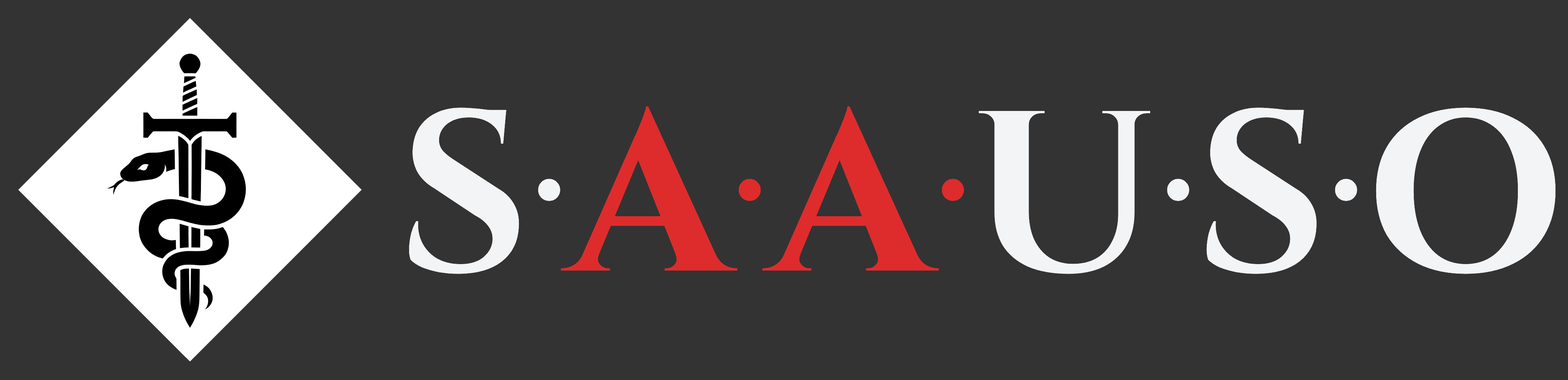
<style>
.page{position:relative;width:1568px;height:380px;background:#333333}
.page>*{position:absolute;margin:0}
.t1{font:227.9px "CinzelRoman-Bold";color:#f3f4f6}
.t2{font:227.9px "CinzelRoman-Bold";color:#de2c2c}
.t3{font:151.9px "CinzelRoman-Bold";color:#f3f4f6}
.t4{font:151.9px "CinzelRoman-Bold";color:#de2c2c}
</style>
<div class="page">
<p class="t1" style="left:409px;top:106px;width:1147px;height:168px">S <span class="t2">A A </span>U S O</p>
<p class="t3" style="left:538px;top:179px;width:22px;height:22px">·</p>
<p class="t4" style="left:738px;top:179px;width:23px;height:22px">·</p>
<p class="t4" style="left:942px;top:179px;width:22px;height:22px">·</p>
<p class="t3" style="left:1167px;top:179px;width:22px;height:22px">·</p>
<p class="t3" style="left:1335px;top:179px;width:22px;height:22px">·</p>
</div>
